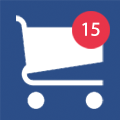
<style>
.page{position:relative;width:120px;height:120px;background:#ffffff}
.page>*{position:absolute;margin:0}
.t1{font:19.6px "MyriadPro-Regular";color:#ffffff}
</style>
<div class="page">
<p class="t1" style="left:82px;top:22px;width:18px;height:14px">15</p>
</div>
